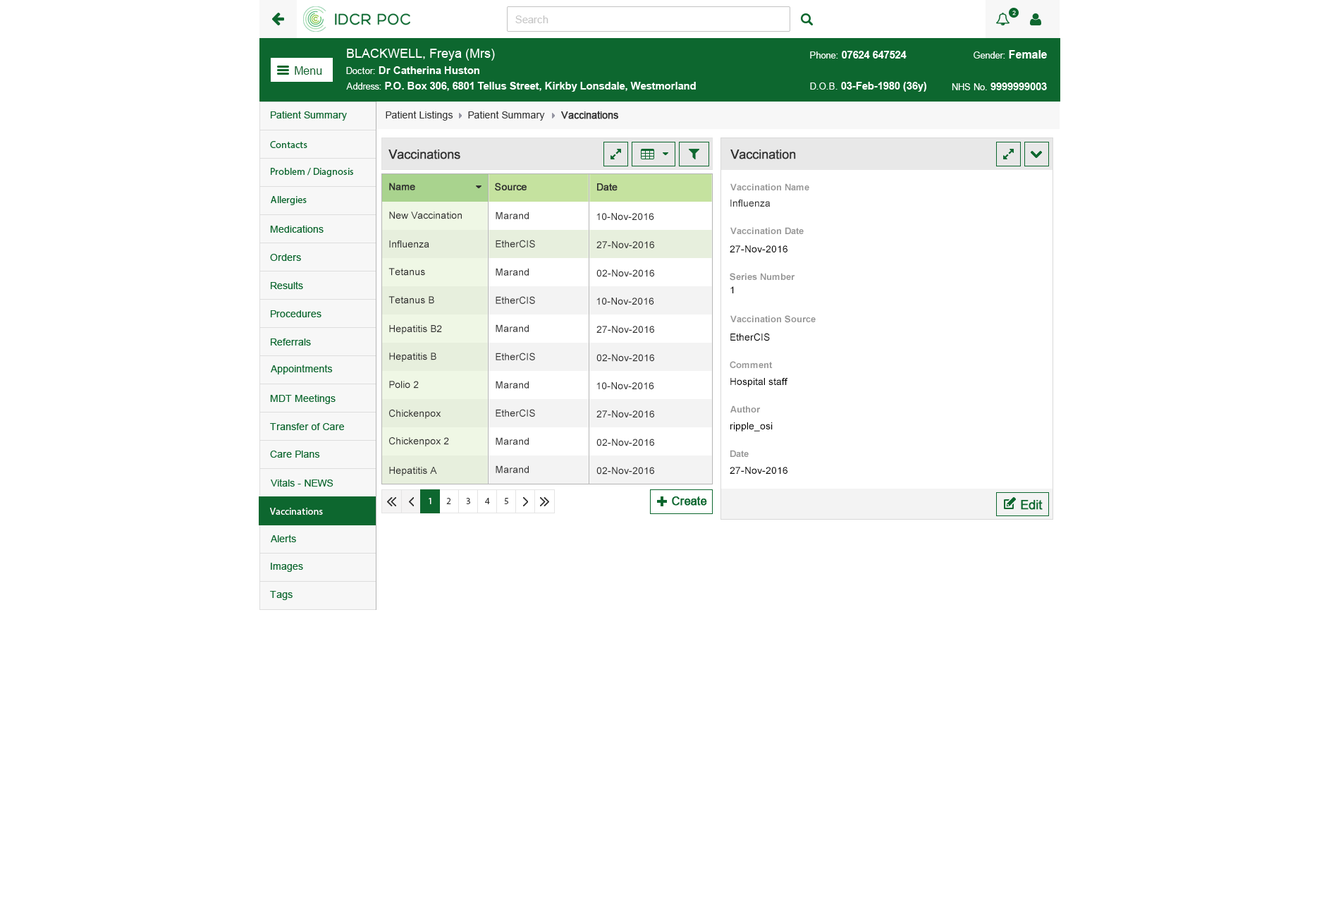
<style>
.page{position:relative;width:1319px;height:904px;background:#ffffff}
.page>*{position:absolute;margin:0}
.t1{font:9.9px "ArialMT";color:#313131}
.t2{font:9.9px "ArialMT";color:#313131;font-weight:bold}
.t3{font:12.7px "ArialMT";color:#303030;font-weight:bold}
.t4{font:9.9px "ArialMT";color:#303030;font-weight:bold}
.t5{font:9.2px "Arial-BoldMT";color:#959595}
.t6{font:9.9px "ArialMT";color:#303030}
.t7{font:9.9px "ArialMT";color:#000000}
.t8{font:9.9px "MyriadPro-Regular";color:#ffffff}
</style>
<div class="page">
<p class="t1" style="left:386px;top:111px;width:67px;height:10px">Patient Listings</p>
<p class="t1" style="left:468px;top:111px;width:77px;height:10px">Patient Summary</p>
<p class="t2" style="left:561px;top:111px;width:57px;height:8px">Vaccinations</p>
<p class="t3" style="left:388px;top:149px;width:72px;height:10px">Vaccinations</p>
<p class="t3" style="left:730px;top:149px;width:66px;height:10px">Vaccination</p>
<p class="t4" style="left:389px;top:183px;width:26px;height:7px">Name</p>
<p class="t4" style="left:495px;top:183px;width:32px;height:8px">Source</p>
<p class="t4" style="left:597px;top:183px;width:21px;height:8px">Date</p>
<p class="t5" style="left:730px;top:183px;width:79px;height:7px">Vaccination Name</p>
<p class="t6" style="left:730px;top:200px;width:41px;height:7px">Influenza</p>
<p class="t6" style="left:389px;top:212px;width:73px;height:7px">New Vaccination</p>
<p class="t6" style="left:496px;top:212px;width:33px;height:7px">Marand</p>
<p class="t6" style="left:596px;top:213px;width:58px;height:7px">10-Nov-2016</p>
<p class="t5" style="left:730px;top:227px;width:74px;height:7px">Vaccination Date</p>
<p class="t6" style="left:389px;top:240px;width:40px;height:7px">Influenza</p>
<p class="t6" style="left:496px;top:240px;width:39px;height:7px">EtherCIS</p>
<p class="t6" style="left:596px;top:241px;width:58px;height:7px">27-Nov-2016</p>
<p class="t7" style="left:730px;top:245px;width:58px;height:7px">27-Nov-2016</p>
<p class="t6" style="left:388px;top:268px;width:37px;height:8px">Tetanus</p>
<p class="t6" style="left:496px;top:268px;width:33px;height:8px">Marand</p>
<p class="t6" style="left:596px;top:269px;width:58px;height:8px">02-Nov-2016</p>
<p class="t5" style="left:730px;top:273px;width:65px;height:8px">Series Number</p>
<p class="t7" style="left:730px;top:286px;width:4px;height:7px">1</p>
<p class="t6" style="left:388px;top:296px;width:46px;height:8px">Tetanus B</p>
<p class="t6" style="left:496px;top:296px;width:39px;height:8px">EtherCIS</p>
<p class="t6" style="left:596px;top:298px;width:58px;height:7px">10-Nov-2016</p>
<p class="t5" style="left:730px;top:315px;width:86px;height:8px">Vaccination Source</p>
<p class="t6" style="left:389px;top:325px;width:53px;height:9px">Hepatitis B2</p>
<p class="t6" style="left:496px;top:324px;width:33px;height:8px">Marand</p>
<p class="t6" style="left:596px;top:326px;width:58px;height:7px">27-Nov-2016</p>
<p class="t7" style="left:730px;top:333px;width:40px;height:8px">EtherCIS</p>
<p class="t6" style="left:389px;top:353px;width:47px;height:9px">Hepatitis B</p>
<p class="t6" style="left:496px;top:353px;width:39px;height:7px">EtherCIS</p>
<p class="t6" style="left:596px;top:354px;width:58px;height:8px">02-Nov-2016</p>
<p class="t5" style="left:730px;top:361px;width:43px;height:7px">Comment</p>
<p class="t7" style="left:730px;top:378px;width:58px;height:9px">Hospital staff</p>
<p class="t6" style="left:389px;top:381px;width:30px;height:7px">Polio 2</p>
<p class="t6" style="left:496px;top:381px;width:33px;height:7px">Marand</p>
<p class="t6" style="left:596px;top:382px;width:58px;height:7px">10-Nov-2016</p>
<p class="t6" style="left:389px;top:409px;width:52px;height:10px">Chickenpox</p>
<p class="t6" style="left:496px;top:409px;width:39px;height:8px">EtherCIS</p>
<p class="t6" style="left:596px;top:410px;width:58px;height:7px">27-Nov-2016</p>
<p class="t5" style="left:730px;top:405px;width:31px;height:7px">Author</p>
<p class="t7" style="left:730px;top:422px;width:43px;height:10px">ripple_osi</p>
<p class="t6" style="left:389px;top:437px;width:60px;height:9px">Chickenpox 2</p>
<p class="t6" style="left:496px;top:437px;width:33px;height:8px">Marand</p>
<p class="t6" style="left:596px;top:439px;width:58px;height:7px">02-Nov-2016</p>
<p class="t5" style="left:730px;top:450px;width:19px;height:7px">Date</p>
<p class="t6" style="left:389px;top:467px;width:48px;height:9px">Hepatitis A</p>
<p class="t6" style="left:496px;top:465px;width:33px;height:8px">Marand</p>
<p class="t6" style="left:596px;top:467px;width:58px;height:8px">02-Nov-2016</p>
<p class="t7" style="left:730px;top:467px;width:58px;height:7px">27-Nov-2016</p>
<p class="t8" style="left:270px;top:508px;width:53px;height:7px">Vaccinations</p>
</div>
